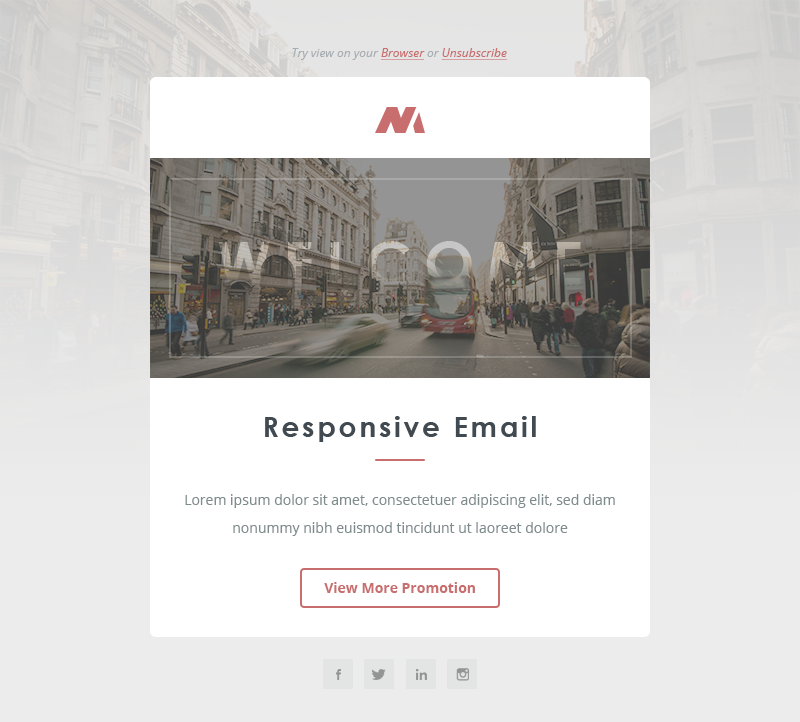
<style>
.page{position:relative;width:800px;height:722px;background:#ffffff}
.page>*{position:absolute;margin:0}
.t1{font:12px "OpenSans-Italic";color:#a7aeb3}
.t2{font:12px "OpenSans-Italic";color:#c86e6e;text-decoration:underline}
.t3{font:60px "CenturyGothic-Bold";letter-spacing:0.2em}
.t4{font:28px "CenturyGothic-Bold";letter-spacing:0.1em;color:#414a51}
.t5{font:14px/28px "OpenSans";color:#7f8c8d}
.t6{font:14px "OpenSans-Bold";color:#c86e6e}
</style>
<div class="page">
<p class="t1" style="left:292px;top:48px;width:215px;height:12px">Try view on your <span class="t2">Browser </span>or <span class="t2">Unsubscribe</span></p>
<p class="t3" style="left:218px;top:241px;width:363px;height:45px">WELCOME</p>
<p class="t4" style="left:265px;top:416px;width:271px;height:26px">Responsive Email</p>
<p class="t5" style="left:185px;top:494px;width:430px;height:42px;text-align:center">Lorem ipsum dolor sit amet, consectetuer adipiscing elit, sed diam nonummy nibh euismod tincidunt ut laoreet dolore</p>
<p class="t6" style="left:324px;top:582px;width:151px;height:11px">View More Promotion</p>
</div>
